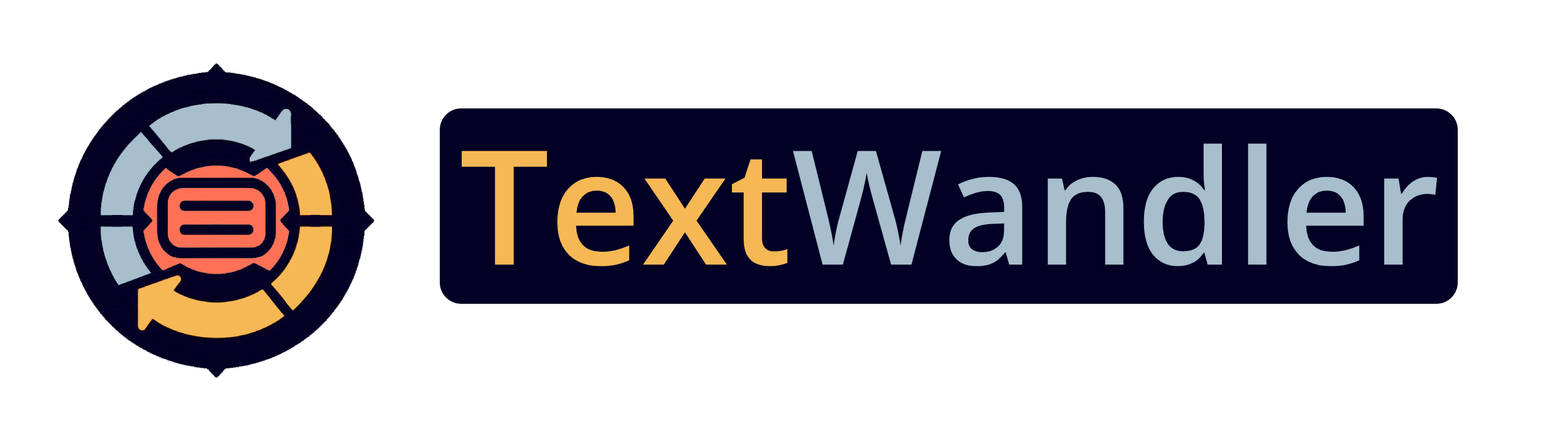
<style>
.page{position:relative;width:1568px;height:441px;background:#ffffff}
.page>*{position:absolute;margin:0}
.t1{font:159.2px "OpenSans-SemiBold";color:#a7becc}
.t2{font:159.2px "OpenSans-SemiBold";color:#f6b855}
</style>
<div class="page">
<p class="t1" style="left:461px;top:143px;width:977px;height:123px"><span class="t2">Text</span>Wandler</p>
</div>
